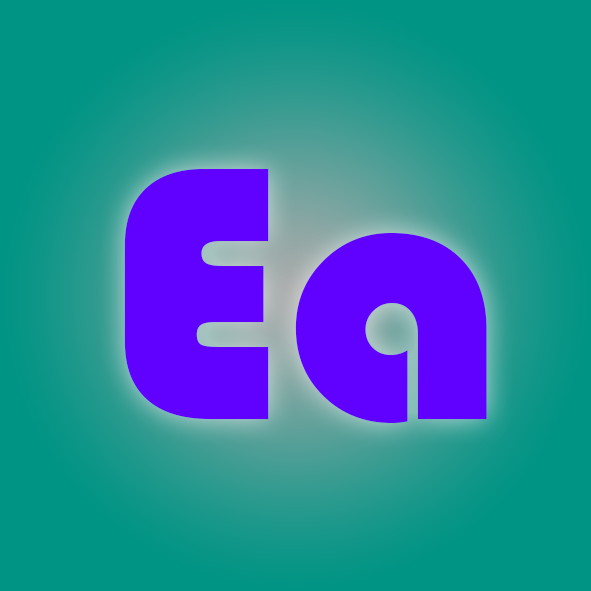
<style>
.page{position:relative;width:591px;height:591px;background:#009484}
.page>*{position:absolute;margin:0}
.t1{font:375px "Bauhaus93";color:#6000fe}
</style>
<div class="page">
<p class="t1" style="left:124px;top:169px;width:363px;height:254px">Ea</p>
</div>
